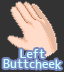
<style>
.page{position:relative;width:64px;height:72px;background:#333333}
.page>*{position:absolute;margin:0}
.t1{font:12px/10px "JK-Gothic-M";color:#c9ffff}
</style>
<div class="page">
<p class="t1" style="left:3px;top:49px;width:59px;height:20px;text-align:center">Left<br>Buttcheek</p>
</div>
